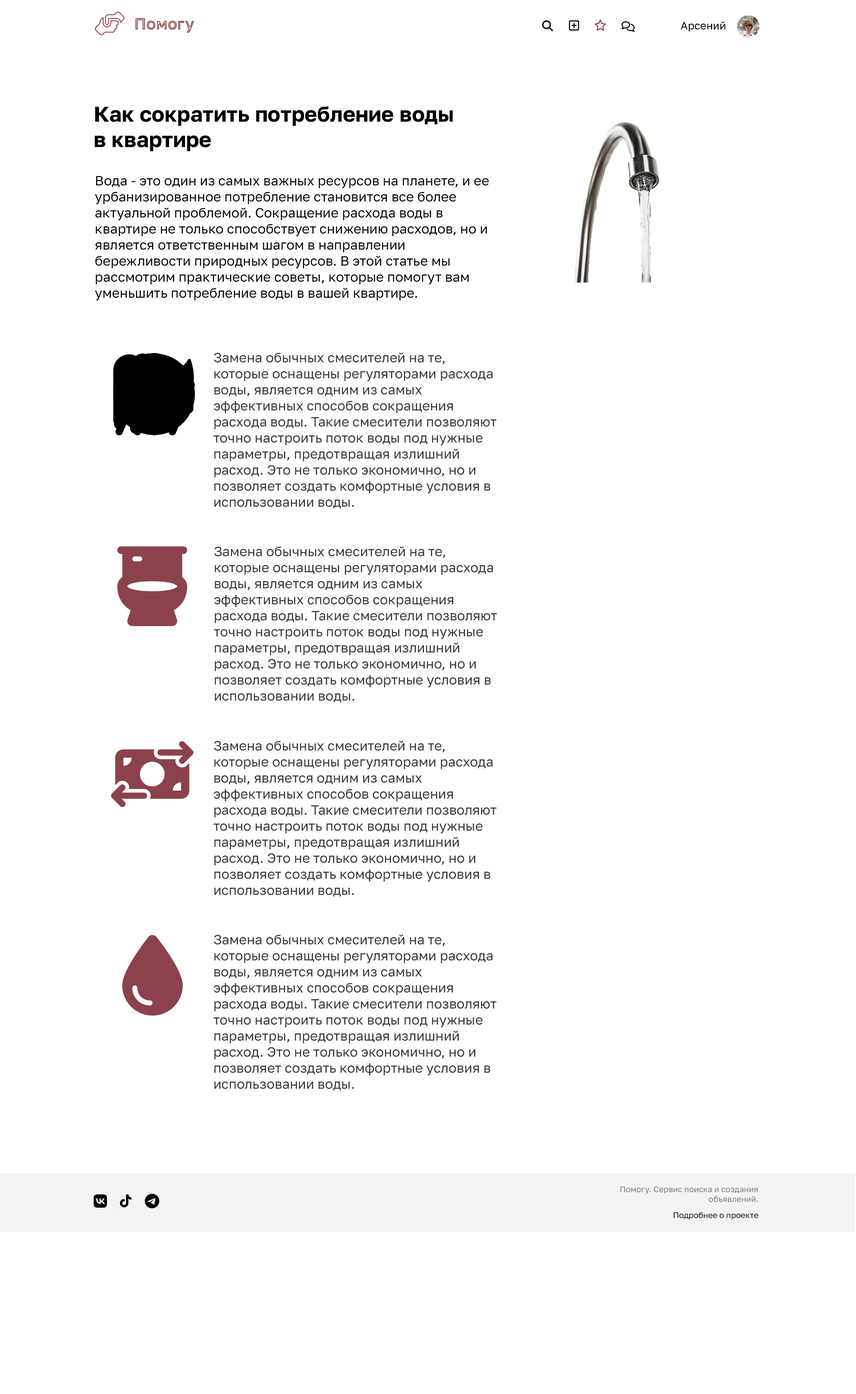
<style>
.page{position:relative;width:856px;height:1394px;background:#ffffff}
.page>*{position:absolute;margin:0}
.t1{font:16px "GolosText-SemiBold";color:#8b424c}
.t2{font:10.7px "GolosText-Regular";color:#000000}
.t3{font:21.4px "GolosText-Bold";color:#000000}
.t4{font:13.4px "GolosText-Regular";color:#000000}
.t5{font:13.4px "GolosText-Regular";color:#363636}
.t6{font:8px "GolosText-Regular";color:#7c7c7c}
.t7{font:8px "GolosText-Regular";color:#000000}
</style>
<div class="page">
<p class="t1" style="left:135px;top:18px;width:59px;height:15px">Помогу</p>
<p class="t2" style="left:680px;top:21px;width:45px;height:11px">Арсений</p>
<p class="t3" style="left:94px;top:106px;width:359px;height:45px">Как сократить потребление воды<br>в квартире</p>
<p class="t4" style="left:95px;top:176px;width:393px;height:125px">Вода - это один из самых важных ресурсов на планете, и ее урбанизированное потребление становится все более актуальной проблемой. Сокращение расхода воды в квартире не только способствует снижению расходов, но и является ответственным шагом в направлении бережливости природных ресурсов. В этой статье мы рассмотрим практические советы, которые помогут вам уменьшить потребление воды в вашей квартире.</p>
<p class="t5" style="left:213px;top:352px;width:283px;height:156px">Замена обычных смесителей на те, которые оснащены регуляторами расхода воды, является одним из самых эффективных способов сокращения расхода воды. Такие смесители позволяют точно настроить поток воды под нужные параметры, предотвращая излишний расход. Это не только экономично, но и позволяет создать комфортные условия в использовании воды.</p>
<p class="t5" style="left:214px;top:546px;width:283px;height:156px">Замена обычных смесителей на те, которые оснащены регуляторами расхода воды, является одним из самых эффективных способов сокращения расхода воды. Такие смесители позволяют точно настроить поток воды под нужные параметры, предотвращая излишний расход. Это не только экономично, но и позволяет создать комфортные условия в использовании воды.</p>
<p class="t5" style="left:213px;top:741px;width:283px;height:156px">Замена обычных смесителей на те, которые оснащены регуляторами расхода воды, является одним из самых эффективных способов сокращения расхода воды. Такие смесители позволяют точно настроить поток воды под нужные параметры, предотвращая излишний расход. Это не только экономично, но и позволяет создать комфортные условия в использовании воды.</p>
<p class="t5" style="left:213px;top:934px;width:283px;height:156px">Замена обычных смесителей на те, которые оснащены регуляторами расхода воды, является одним из самых эффективных способов сокращения расхода воды. Такие смесители позволяют точно настроить поток воды под нужные параметры, предотвращая излишний расход. Это не только экономично, но и позволяет создать комфортные условия в использовании воды.</p>
<p class="t6" style="left:620px;top:1186px;width:137px;height:16px;text-align:right">Помогу. Сервис поиска и создания<br>объявлений.</p>
<p class="t7" style="left:673px;top:1212px;width:85px;height:8px">Подробнее о проекте</p>
</div>
